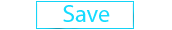
<style>
.page{position:relative;width:172px;height:30px;background:#ffffff}
.page>*{position:absolute;margin:0}
.t1{font:24.7px "MyriadPro-Regular";color:#15dbff}
</style>
<div class="page">
<p class="t1" style="left:63px;top:5px;width:47px;height:17px">Save</p>
</div>
